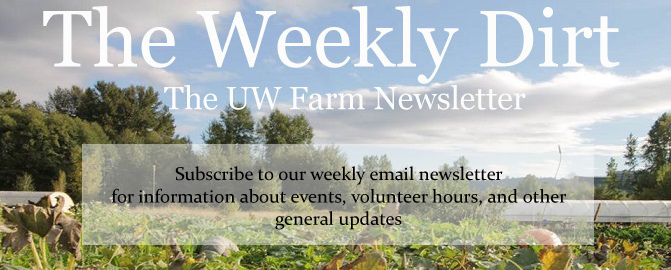
<style>
.page{position:relative;width:671px;height:270px}
.page>*{position:absolute;margin:0}
.t1{font:18.7px "Constantia";color:#000000}
</style>
<div class="page">
<p class="t1" style="left:111px;top:166px;width:455px;height:64px;text-align:center">Subscribe to our weekly email newsletter <br>for information about events, volunteer hours, and other general updates</p>
</div>
